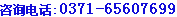
<style>
.page{position:relative;width:177px;height:17px;background:#ffffff}
.page>*{position:absolute;margin:0}
.t1{font:16px "NSimSun";color:#100bd9;font-weight:bold}
.t2{font:12px "SimSun";color:#100bd9;font-weight:bold}
</style>
<div class="page">
<p class="t1" style="left:0px;top:3px;width:175px;height:13px"><span class="t2">咨询电话:</span>0371-65607699</p>
</div>
